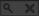
<style>
.page{position:relative;width:39px;height:16px;background:#414141}
.page>*{position:absolute;margin:0}
.t1{font:22px "Arial-BoldMT";letter-spacing:0.01em;color:#252525}
</style>
<div class="page">
<p class="t1" style="left:24px;top:3px;width:11px;height:11px">×</p>
</div>
